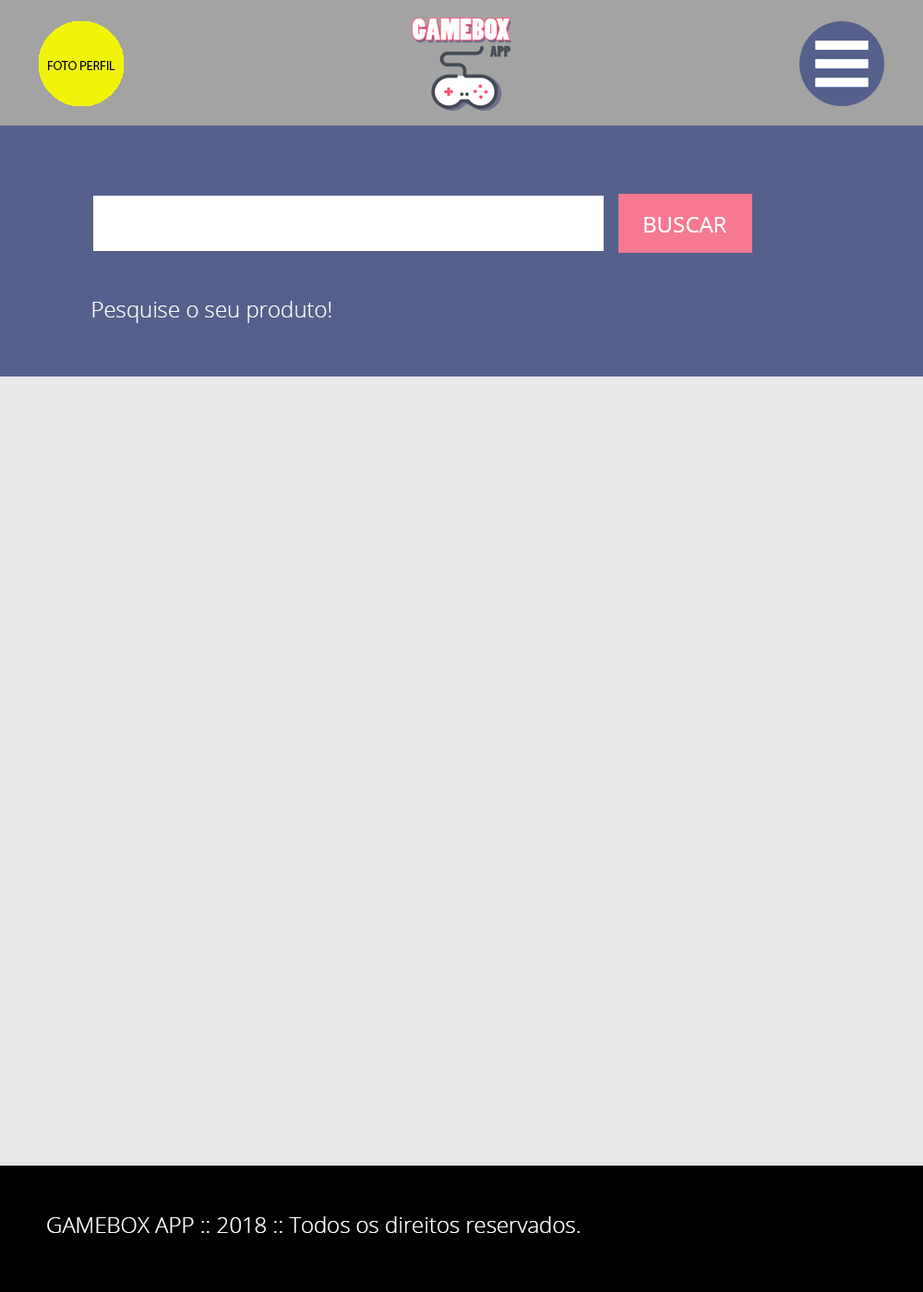
<style>
.page{position:relative;width:923px;height:1292px;background:#e8e8e8}
.page>*{position:absolute;margin:0}
.t1{font:12.9px "MyriadPro-Regular";color:#000000}
.t2{font:22.1px "OpenSans-Regular";color:#ffffff}
.t3{font:22.1px "OpenSans-Light";color:#ffffff}
</style>
<div class="page">
<p class="t1" style="left:48px;top:61px;width:67px;height:9px">FOTO PERFIL</p>
<p class="t2" style="left:644px;top:217px;width:82px;height:16px">BUSCAR</p>
<p class="t3" style="left:92px;top:301px;width:239px;height:22px">Pesquise o seu produto!</p>
<p class="t3" style="left:47px;top:1216px;width:533px;height:17px">GAMEBOX APP :: 2018 :: Todos os direitos reservados.</p>
</div>
